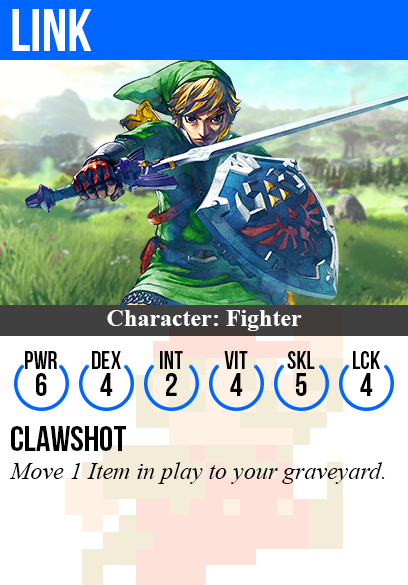
<style>
.page{position:relative;width:408px;height:585px;background:#ffffff}
.page>*{position:absolute;margin:0}
.t1{font:60px "BebasNeue";color:#ffffff}
.t2{font:24px "TimesNewRomanPS-BoldMT";color:#ffffff}
.t3{font:25px "BebasNeue";color:#000000}
.t4{font:32px "BebasNeue";color:#000000}
.t5{font:36px "BebasNeue";color:#000000}
.t6{font:24px "TimesNewRomanPS-ItalicMT";color:#000000}
</style>
<div class="page">
<p class="t1" style="left:12px;top:9px;width:80px;height:42px">link</p>
<p class="t2" style="left:107px;top:310px;width:195px;height:21px">Character: Fighter</p>
<p class="t3" style="left:25px;top:351px;width:32px;height:18px">PWR</p>
<p class="t3" style="left:92px;top:351px;width:29px;height:18px">dex</p>
<p class="t3" style="left:160px;top:351px;width:23px;height:18px">int</p>
<p class="t3" style="left:224px;top:351px;width:24px;height:18px">vit</p>
<p class="t3" style="left:287px;top:351px;width:28px;height:18px">skl</p>
<p class="t3" style="left:353px;top:351px;width:27px;height:18px">lck</p>
<p class="t4" style="left:36px;top:373px;width:11px;height:23px">6</p>
<p class="t4" style="left:100px;top:373px;width:13px;height:23px">4</p>
<p class="t4" style="left:166px;top:373px;width:11px;height:23px">2</p>
<p class="t4" style="left:230px;top:373px;width:13px;height:23px">4</p>
<p class="t4" style="left:296px;top:373px;width:11px;height:23px">5</p>
<p class="t4" style="left:360px;top:373px;width:13px;height:23px">4</p>
<p class="t5" style="left:11px;top:426px;width:115px;height:25px">clawshot</p>
<p class="t6" style="left:10px;top:462px;width:375px;height:22px">Move 1 Item in play to your graveyard.</p>
</div>
